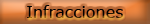
<style>
.page{position:relative;width:150px;height:24px}
.page>*{position:absolute;margin:0}
.t1{font:16px "Verdana"}
</style>
<div class="page">
<p class="t1" style="left:27px;top:5px;width:96px;height:13px">Infracciones</p>
</div>
